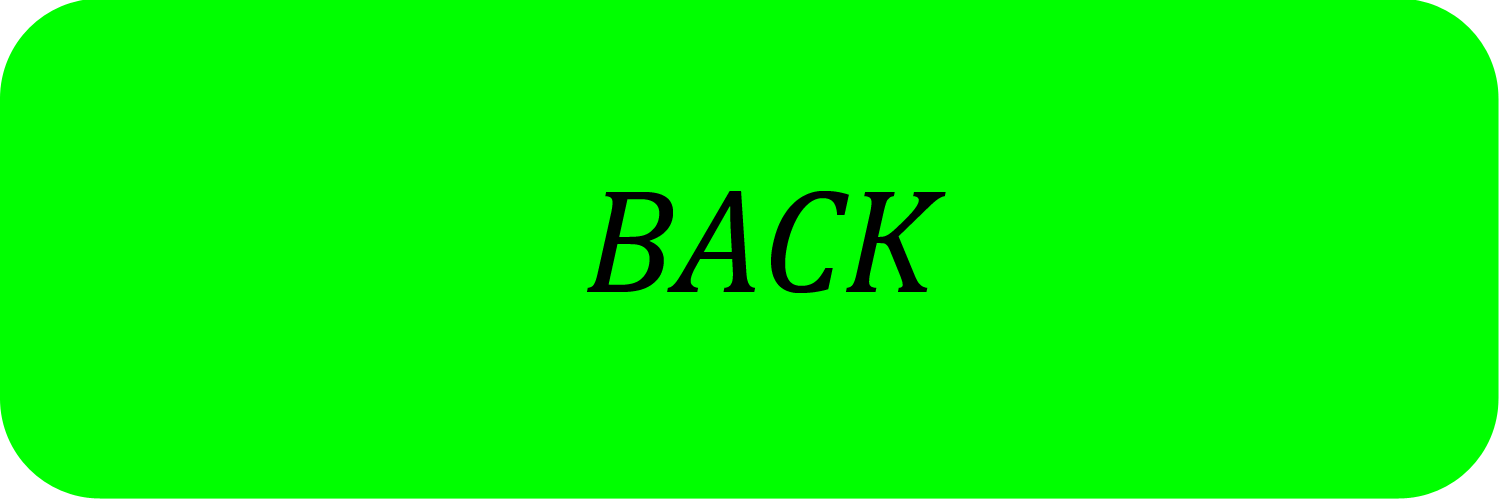
<style>
.page{position:relative;width:1500px;height:500px;background:#00ff00}
.page>*{position:absolute;margin:0}
.t1{font:150px "Cambria-Italic";color:#000000}
</style>
<div class="page">
<p class="t1" style="left:587px;top:191px;width:359px;height:102px">BACK</p>
</div>
